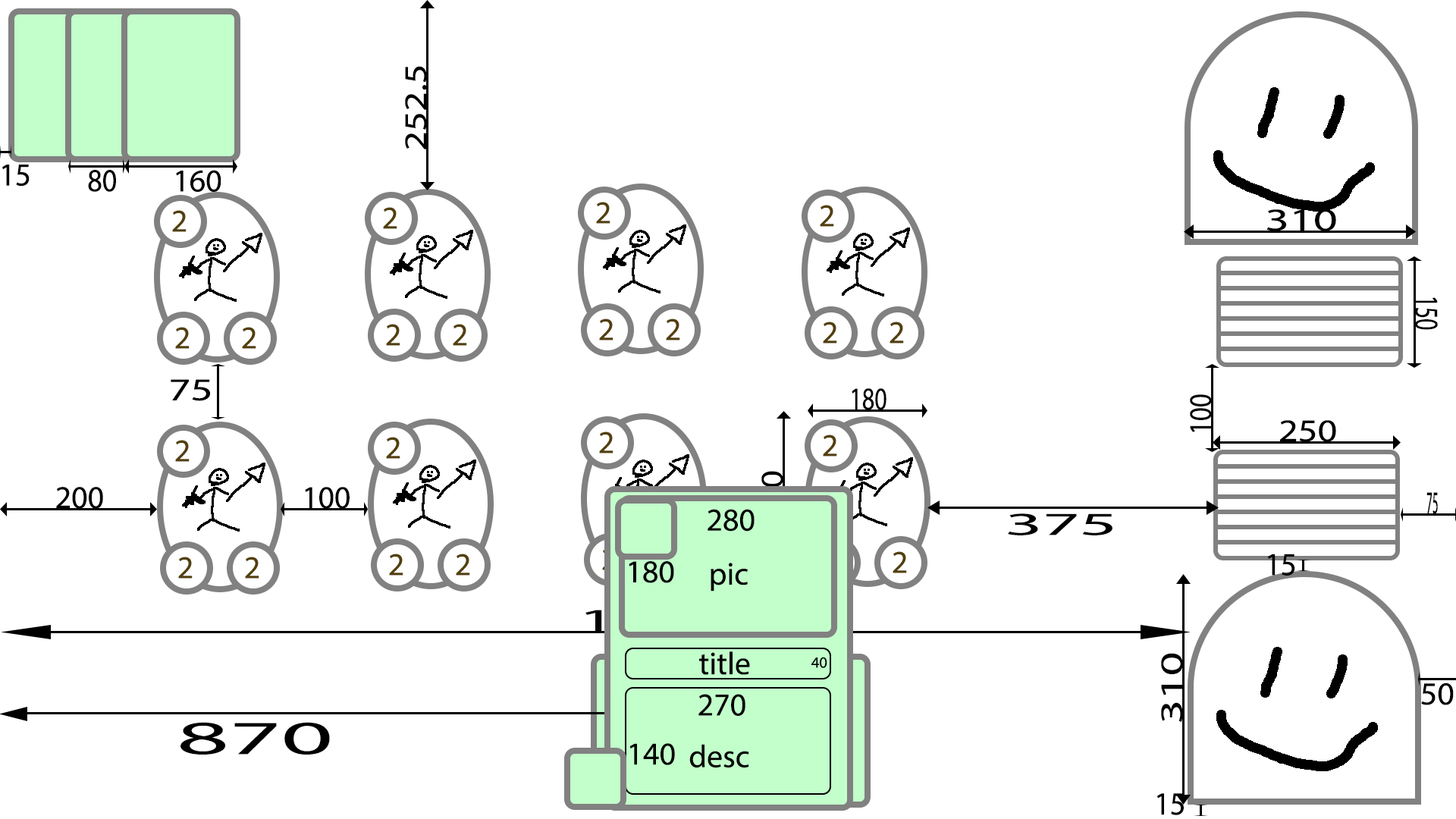
<style>
.page{position:relative;width:1456px;height:819px;background:#ffffff}
.page>*{position:absolute;margin:0}
.t1{font:31.8px "MyriadPro-Regular";color:#000000;scale:1.21 1}
.t2{font:32.2px "MyriadPro-Regular";color:#000000;scale:0.96 1}
.t3{font:32.2px "MyriadPro-Regular";color:#000000;scale:0.89 1}
.t4{font:31.8px "MyriadPro-Regular";color:#000000}
.t5{font:31.8px "MyriadPro-Regular";color:#533f0b}
.t6{font:31.8px "MyriadPro-Regular";color:#000000;scale:1.48 1}
.t7{font:33.5px "MyriadPro-Regular";color:#000000;scale:0.68 1}
.t8{font:31.8px "MyriadPro-Regular";color:#000000;scale:1.36 1}
.t9{font:31.8px "MyriadPro-Regular";color:#000000;scale:0.76 1}
.t10{font:31.8px "MyriadPro-Regular";color:#000000;scale:0.84 1}
.t11{font:31.8px "MyriadPro-Regular";color:#000000;scale:1.2 1}
.t12{font:31.8px "MyriadPro-Regular";scale:1.12 1}
.t13{font:31.8px "MyriadPro-Regular";color:#000000;scale:0.36 1}
.t14{font:32px "MyriadPro-Regular";color:#000000;scale:2.28 1}
.t15{font:31.8px "MyriadPro-Regular";color:#000000;scale:1.47 1}
.t16{font:15.5px "MyriadPro-Regular";color:#000000}
.t17{font:32.2px "MyriadPro-Regular";color:#000000;scale:1.03 1}
.t18{font:47.4px "MyriadPro-Regular";color:#000000;scale:2.14 1}
.t19{font:32.4px "MyriadPro-Regular";color:#000000;scale:0.95 1}
</style>
<div class="page">
<p class="t1" style="left:405px;top:66px;width:22px;height:83px;rotate:-90deg">252.5</p>
<p class="t2" style="left:2px;top:165px;width:28px;height:22px">15</p>
<p class="t3" style="left:88px;top:170px;width:28px;height:22px">80</p>
<p class="t4" style="left:176px;top:170px;width:45px;height:22px">160</p>
<p class="t5" style="left:383px;top:207px;width:14px;height:22px">2</p>
<p class="t5" style="left:596px;top:202px;width:14px;height:22px">2</p>
<p class="t5" style="left:820px;top:205px;width:14px;height:22px">2</p>
<p class="t6" style="left:1266px;top:209px;width:70px;height:22px">310</p>
<p class="t5" style="left:172px;top:210px;width:15px;height:22px">2</p>
<p class="t7" style="left:1415px;top:297px;width:23px;height:33px;rotate:90deg">150</p>
<p class="t5" style="left:175px;top:327px;width:15px;height:22px">2</p>
<p class="t5" style="left:242px;top:327px;width:14px;height:22px">2</p>
<p class="t5" style="left:386px;top:324px;width:14px;height:22px">2</p>
<p class="t5" style="left:453px;top:324px;width:14px;height:22px">2</p>
<p class="t5" style="left:599px;top:318px;width:14px;height:22px">2</p>
<p class="t5" style="left:666px;top:318px;width:14px;height:22px">2</p>
<p class="t5" style="left:823px;top:322px;width:14px;height:22px">2</p>
<p class="t5" style="left:890px;top:322px;width:14px;height:22px">2</p>
<p class="t8" style="left:171px;top:379px;width:39px;height:22px">75</p>
<p class="t9" style="left:852px;top:388px;width:34px;height:22px">180</p>
<p class="t10" style="left:1190px;top:394px;width:22px;height:38px;rotate:-90deg">100</p>
<p class="t11" style="left:1280px;top:420px;width:56px;height:22px">250</p>
<p class="t5" style="left:386px;top:437px;width:14px;height:22px">2</p>
<p class="t5" style="left:599px;top:431px;width:14px;height:22px">2</p>
<p class="t5" style="left:823px;top:435px;width:14px;height:22px">2</p>
<p class="t5" style="left:175px;top:440px;width:15px;height:22px">2</p>
<p class="t12" style="left:761px;top:471px;width:22px;height:52px;rotate:-90deg">250</p>
<p class="t4" style="left:56px;top:487px;width:47px;height:22px">200</p>
<p class="t4" style="left:305px;top:487px;width:45px;height:22px">100</p>
<p class="t13" style="left:1426px;top:492px;width:12px;height:22px">75</p>
<p class="t4" style="left:708px;top:509px;width:47px;height:23px">280</p>
<p class="t14" style="left:1008px;top:513px;width:104px;height:22px">375</p>
<p class="t5" style="left:178px;top:557px;width:15px;height:22px">2</p>
<p class="t5" style="left:245px;top:557px;width:14px;height:22px">2</p>
<p class="t5" style="left:389px;top:554px;width:14px;height:22px">2</p>
<p class="t5" style="left:456px;top:554px;width:14px;height:22px">2</p>
<p class="t5" style="left:893px;top:551px;width:14px;height:22px">2</p>
<p class="t2" style="left:1268px;top:554px;width:27px;height:22px">15</p>
<p class="t4" style="left:629px;top:561px;width:45px;height:22px">180</p>
<p class="t4" style="left:711px;top:563px;width:37px;height:28px">pic</p>
<p class="t4" style="left:699px;top:651px;width:51px;height:24px">title</p>
<p class="t15" style="left:1161px;top:653px;width:22px;height:69px;rotate:-90deg">310</p>
<p class="t16" style="left:811px;top:657px;width:16px;height:11px">40</p>
<p class="t17" style="left:1421px;top:682px;width:33px;height:23px">50</p>
<p class="t4" style="left:698px;top:694px;width:47px;height:22px">270</p>
<p class="t18" style="left:180px;top:722px;width:150px;height:33px">870</p>
<p class="t4" style="left:629px;top:743px;width:46px;height:22px">140</p>
<p class="t4" style="left:689px;top:744px;width:60px;height:24px">desc</p>
<p class="t19" style="left:1157px;top:793px;width:27px;height:22px">15</p>
</div>
